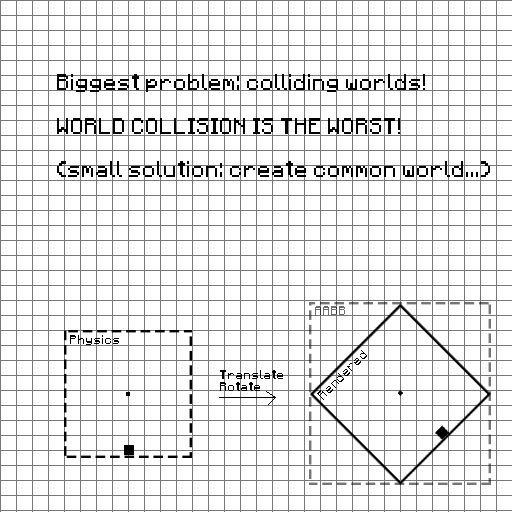
<style>
.page{position:relative;width:512px;height:512px;background:#ffffff}
.page>*{position:absolute;margin:0}
.t1{font:18px "Minecraft";color:#000000}
.t2{font:10px "Minecraft";color:#6c6c6c}
.t3{font:10px "Minecraft";color:#000000}
</style>
<div class="page">
<p class="t1" style="left:57px;top:74px;width:433px;height:103px">Biggest problem: colliding worlds!<br><br>WORLD COLLISION IS THE WORST!<br><br>(small solution: create common world...)</p>
<p class="t2" style="left:315px;top:306px;width:30px;height:9px">AABB</p>
<p class="t3" style="left:70px;top:335px;width:49px;height:10px">Physics</p>
<p class="t3" style="left:317px;top:350px;width:50px;height:50px;rotate:-45deg">Rendered</p>
<p class="t3" style="left:220px;top:370px;width:63px;height:21px">Translate<br>Rotate</p>
</div>
